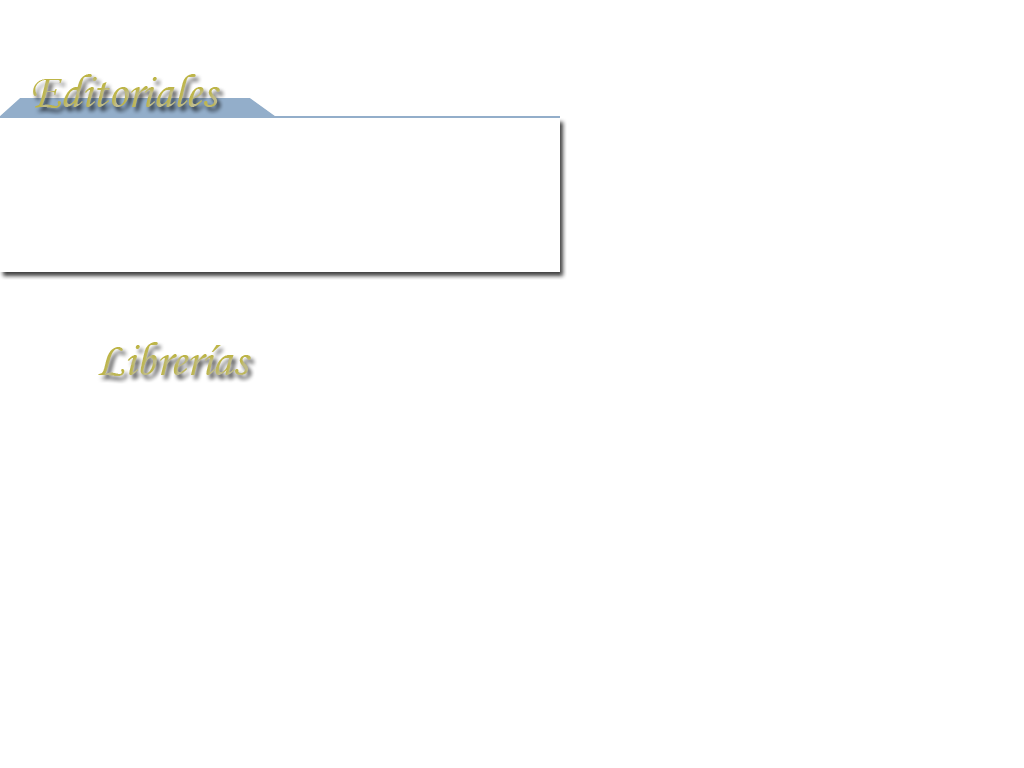
<style>
.page{position:relative;width:1024px;height:768px;background:#ffffff}
.page>*{position:absolute;margin:0}
.t1{font:48px "MonotypeCorsiva"}
</style>
<div class="page">
<p class="t1" style="left:33px;top:74px;width:187px;height:34px">Editoriales</p>
<p class="t1" style="left:98px;top:342px;width:153px;height:34px">Librerías</p>
</div>
